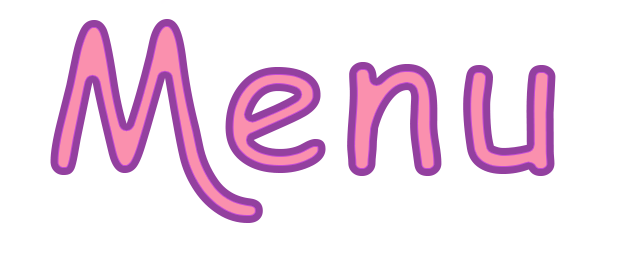
<style>
.page{position:relative;width:628px;height:271px;background:#ffffff}
.page>*{position:absolute;margin:0}
.t1{font:200px "ComicSansMS-Bold";letter-spacing:0.057em}
</style>
<div class="page">
<p class="t1" style="left:50px;top:19px;width:506px;height:204px">Menu</p>
</div>
